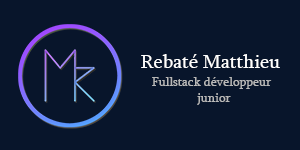
<style>
.page{position:relative;width:300px;height:150px;background:#08152b}
.page>*{position:absolute;margin:0}
.t1{font:20px "Sylfaen";color:#ffffff}
.t2{font:13px "Sylfaen";color:#b8b8b8}
</style>
<div class="page">
<p class="t1" style="left:141px;top:54px;width:139px;height:14px">Rebaté Matthieu</p>
<p class="t2" style="left:152px;top:77px;width:120px;height:28px">Fullstack développeur<br>    junior</p>
</div>
